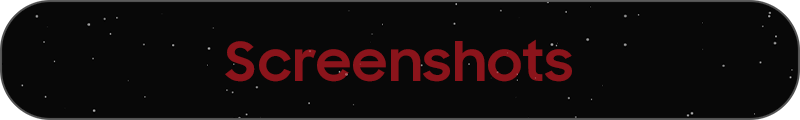
<style>
.page{position:relative;width:800px;height:120px;background:#080808}
.page>*{position:absolute;margin:0}
.t1{font:53.9px "SamsungSharpSans-Bold";letter-spacing:0.025em;color:#8b141b}
</style>
<div class="page">
<p class="t1" style="left:225px;top:39px;width:347px;height:43px">Screenshots</p>
</div>
